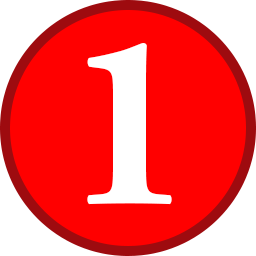
<style>
.page{position:relative;width:256px;height:256px;background:#ff0000}
.page>*{position:absolute;margin:0}
.t1{font:250px "AGaramondPro-Bold";color:#ffffff}
</style>
<div class="page">
<p class="t1" style="left:87px;top:43px;width:85px;height:162px">1</p>
</div>
